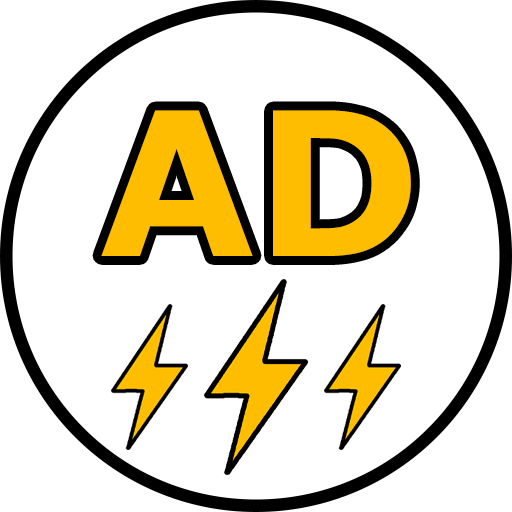
<style>
.page{position:relative;width:512px;height:512px;background:#ffffff}
.page>*{position:absolute;margin:0}
.t1{font:200px "Verdana-Bold";color:#ffbd00}
</style>
<div class="page">
<p class="t1" style="left:101px;top:110px;width:310px;height:146px">AD</p>
</div>
